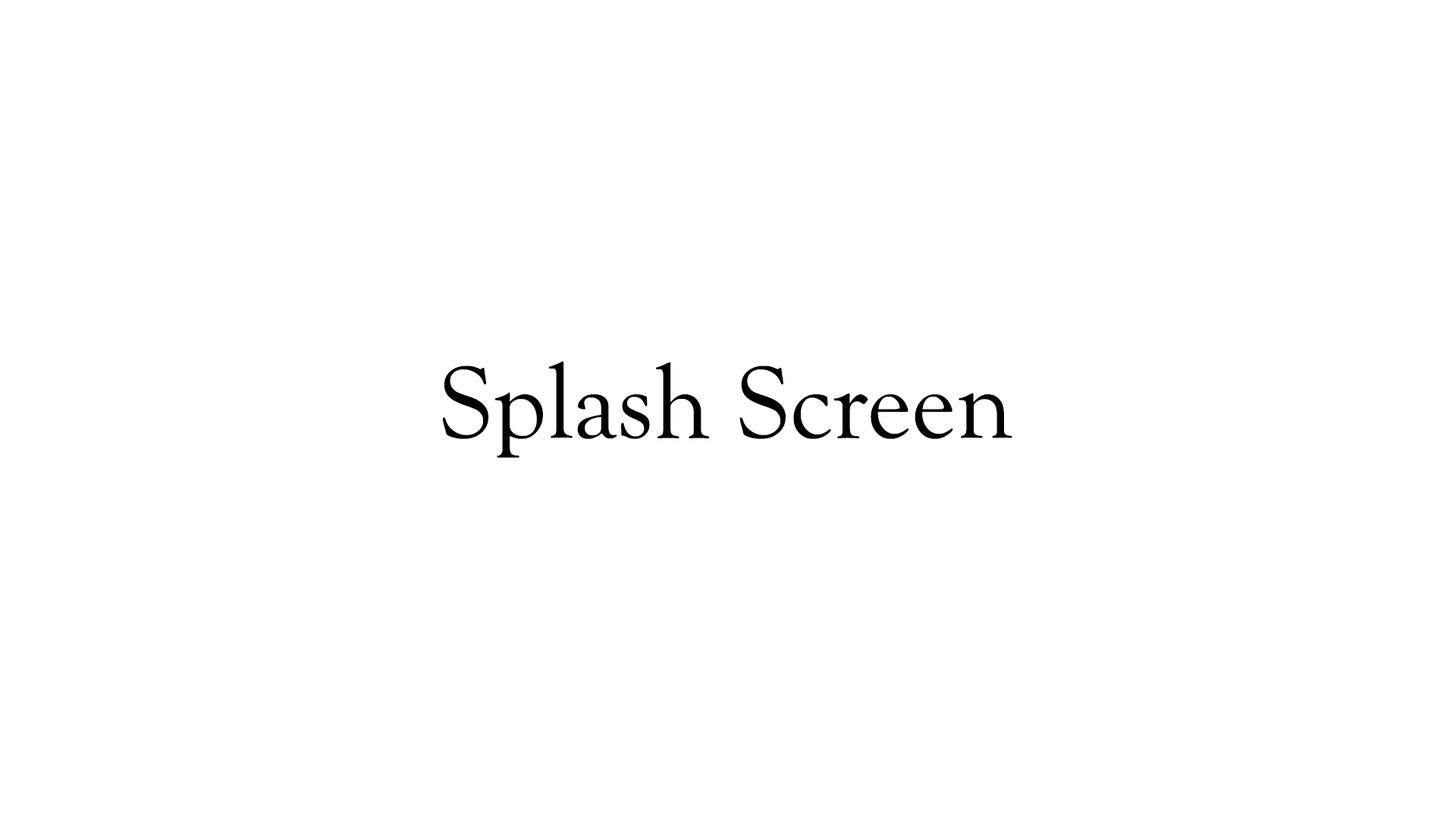
<style>
.page{position:relative;width:1456px;height:819px;background:#ffffff}
.page>*{position:absolute;margin:0}
.t1{font:105.4px "GoudyOldStyleT-Regular";color:#000000}
</style>
<div class="page">
<p class="t1" style="left:443px;top:361px;width:569px;height:97px">Splash Screen</p>
</div>
